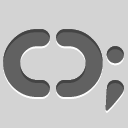
<style>
.page{position:relative;width:128px;height:128px;background:#d3d3d3}
.page>*{position:absolute;margin:0}
.t1{font:100px "PicoBlackAl";color:#616161}
</style>
<div class="page">
<p class="t1" style="left:3px;top:29px;width:121px;height:82px">();</p>
<p class="t1" style="left:3px;top:29px;width:121px;height:82px">();</p>
</div>
